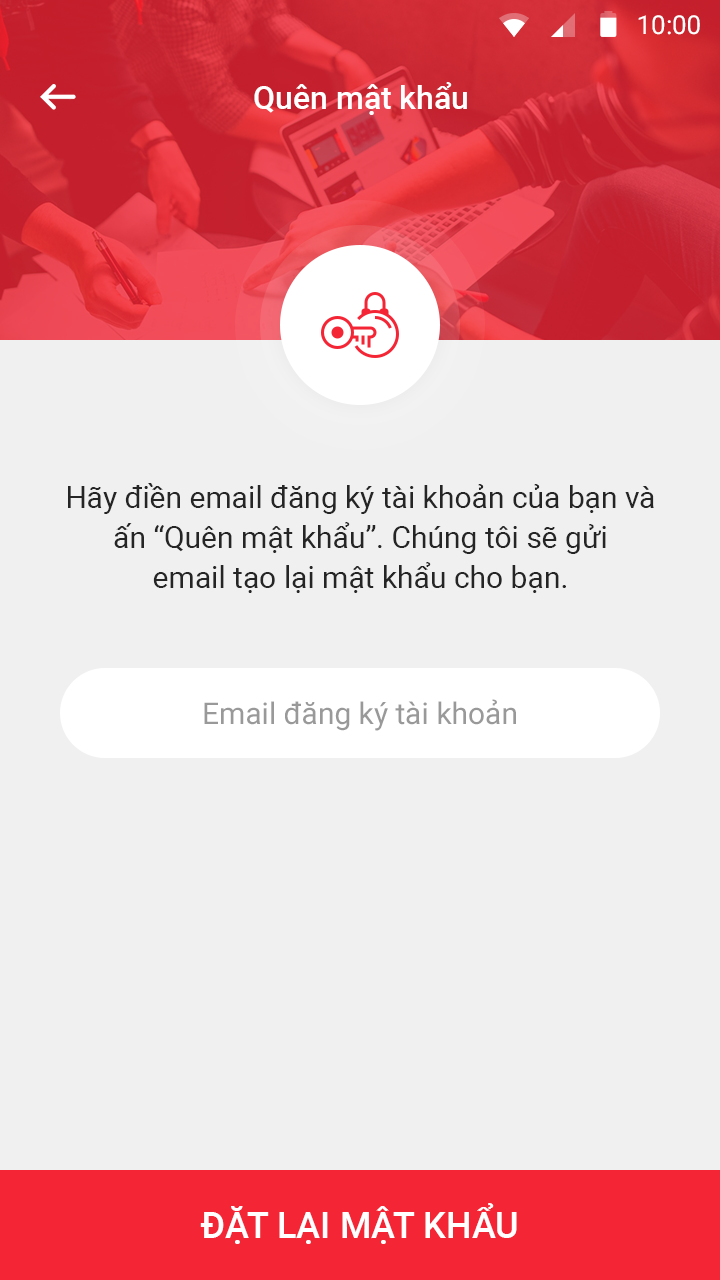
<style>
.page{position:relative;width:720px;height:1280px;background:#f0f0f0}
.page>*{position:absolute;margin:0}
.t1{font:26px "Roboto-Regular";color:#ffffff}
.t2{font:32px "Roboto-Medium";color:#ffffff}
.t3{font:30px/40px "Roboto-Regular";color:#252525}
.t4{font:30px "Roboto-Regular";color:#999999}
.t5{font:36px "Roboto-Medium";color:#ffffff;text-transform:uppercase}
</style>
<div class="page">
<p class="t1" style="left:638px;top:15px;width:62px;height:20px">10:00</p>
<p class="t2" style="left:254px;top:82px;width:213px;height:33px">Quên mật khẩu</p>
<p class="t3" style="left:68px;top:483px;width:586px;height:110px;text-align:center">Hãy điền email đăng ký tài khoản của bạn và<br>ấn “Quên mật khẩu”. Chúng tôi sẽ gửi<br>email tạo lại mật khẩu cho bạn.</p>
<p class="t4" style="left:204px;top:699px;width:312px;height:32px">Email đăng ký tài khoản</p>
<p class="t5" style="left:200px;top:1203px;width:317px;height:41px">Đặt lại mật khẩu</p>
</div>
